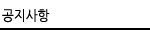
<style>
.page{position:relative;width:150px;height:30px;background:#ffffff}
.page>*{position:absolute;margin:0}
.t1{font:14px "NanumGothic";color:#000000;scale:0.9 1}
</style>
<div class="page">
<p class="t1" style="left:2px;top:9px;width:48px;height:14px">공지사항</p>
</div>
